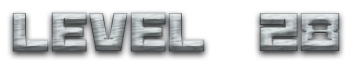
<style>
.page{position:relative;width:364px;height:64px;background:#ffffff}
.page>*{position:absolute;margin:0}
.t1{font:60px "BananaBrick"}
</style>
<div class="page">
<p class="t1" style="left:12px;top:12px;width:328px;height:40px">Level  28</p>
</div>
